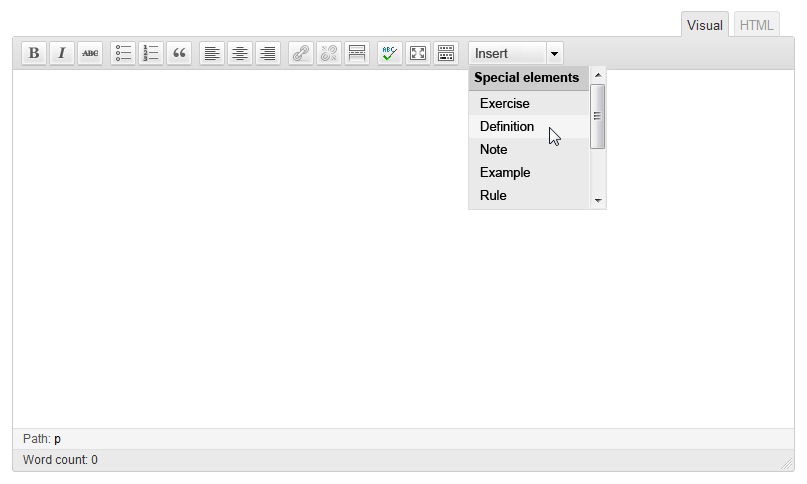
<style>
.page{position:relative;width:807px;height:484px;background:#ffffff}
.page>*{position:absolute;margin:0}
.t1{font:13px "ArialMT";color:#414141}
.t2{font:13px "Arial-BoldMT";color:#000000}
.t3{font:13px/23px "ArialMT";color:#000000}
.t4{font:13px/13px "ArialMT";color:#000000}
</style>
<div class="page">
<p class="t1" style="left:476px;top:48px;width:32px;height:10px">Insert</p>
<p class="t2" style="left:474px;top:72px;width:105px;height:13px">Special elements</p>
<p class="t3" style="left:480px;top:98px;width:54px;height:102px"><span class="t4">Exercise<br></span>Definition<br>Note<br>Example<br>Rule</p>
</div>
